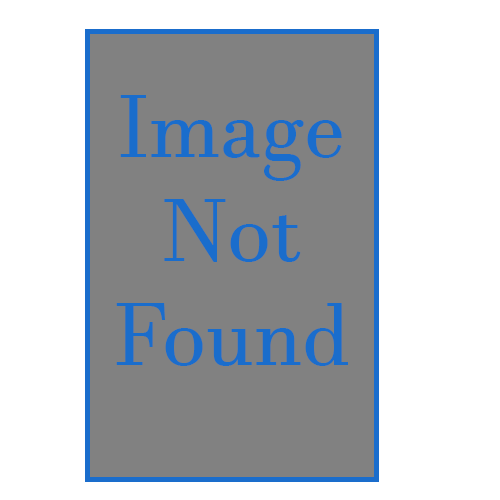
<style>
.page{position:relative;width:500px;height:500px;background:#ffffff}
.page>*{position:absolute;margin:0}
.t1{font:86.8px "JavaneseText";color:#1a6dcc}
</style>
<div class="page">
<p class="t1" style="left:116px;top:95px;width:232px;height:271px;text-align:center">Image <br>Not <br>Found</p>
</div>
